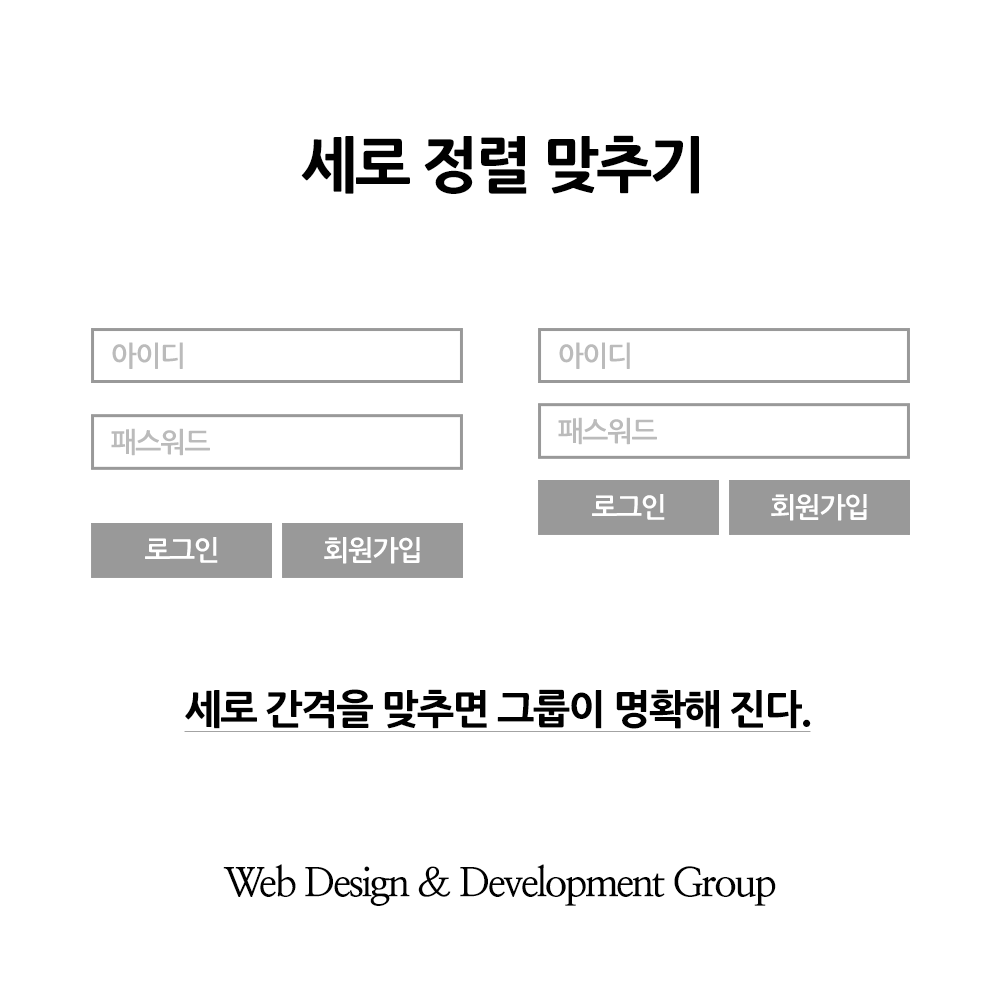
<style>
.page{position:relative;width:1000px;height:1000px;background:#ffffff}
.page>*{position:absolute;margin:0}
.t1{font:60px "NanumGothicExtraBold";letter-spacing:-0.05em;color:#000000}
.t2{font:27.7px "NanumGothicBold";letter-spacing:-0.05em;color:#bbbbbb}
.t3{font:27.7px "NanumGothicBold";letter-spacing:-0.05em;color:#ffffff}
.t4{font:40px "NanumGothicExtraBold";letter-spacing:-0.05em;color:#000000;text-decoration:underline}
.t5{font:40px "NanumMyeongjoBold";letter-spacing:-0.06em;color:#000000}
</style>
<div class="page">
<p class="t1" style="left:301px;top:135px;width:398px;height:59px">세로 정렬 맞추기</p>
<p class="t2" style="left:112px;top:342px;width:71px;height:27px">아이디</p>
<p class="t2" style="left:559px;top:342px;width:71px;height:27px">아이디</p>
<p class="t2" style="left:558px;top:417px;width:99px;height:28px">패스워드</p>
<p class="t2" style="left:111px;top:428px;width:99px;height:28px">패스워드</p>
<p class="t3" style="left:592px;top:494px;width:73px;height:26px">로그인</p>
<p class="t3" style="left:771px;top:494px;width:96px;height:27px">회원가입</p>
<p class="t3" style="left:145px;top:537px;width:73px;height:26px">로그인</p>
<p class="t3" style="left:324px;top:537px;width:96px;height:27px">회원가입</p>
<p class="t4" style="left:184px;top:689px;width:627px;height:43px">세로 간격을 맞추면 그룹이 명확해 진다.</p>
<p class="t5" style="left:223px;top:864px;width:553px;height:42px">Web Design &amp; Development Group</p>
</div>
